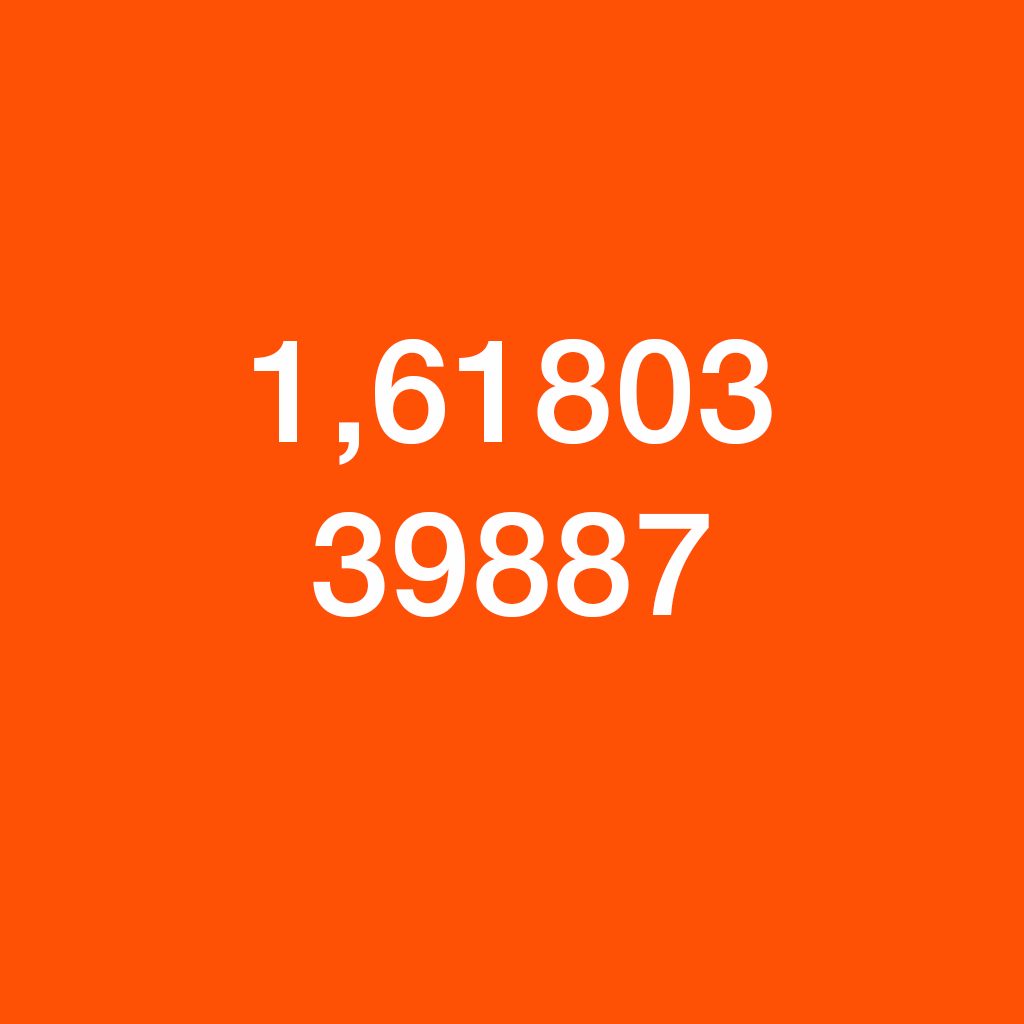
<style>
.page{position:relative;width:1024px;height:1024px;background:#ff5106}
.page>*{position:absolute;margin:0}
.t1{font:144px "HelveticaNeue-Medium";letter-spacing:0.01em;color:#fefefe}
</style>
<div class="page">
<p class="t1" style="left:254px;top:338px;width:518px;height:279px;text-align:center">1,61803<br>39887</p>
</div>
